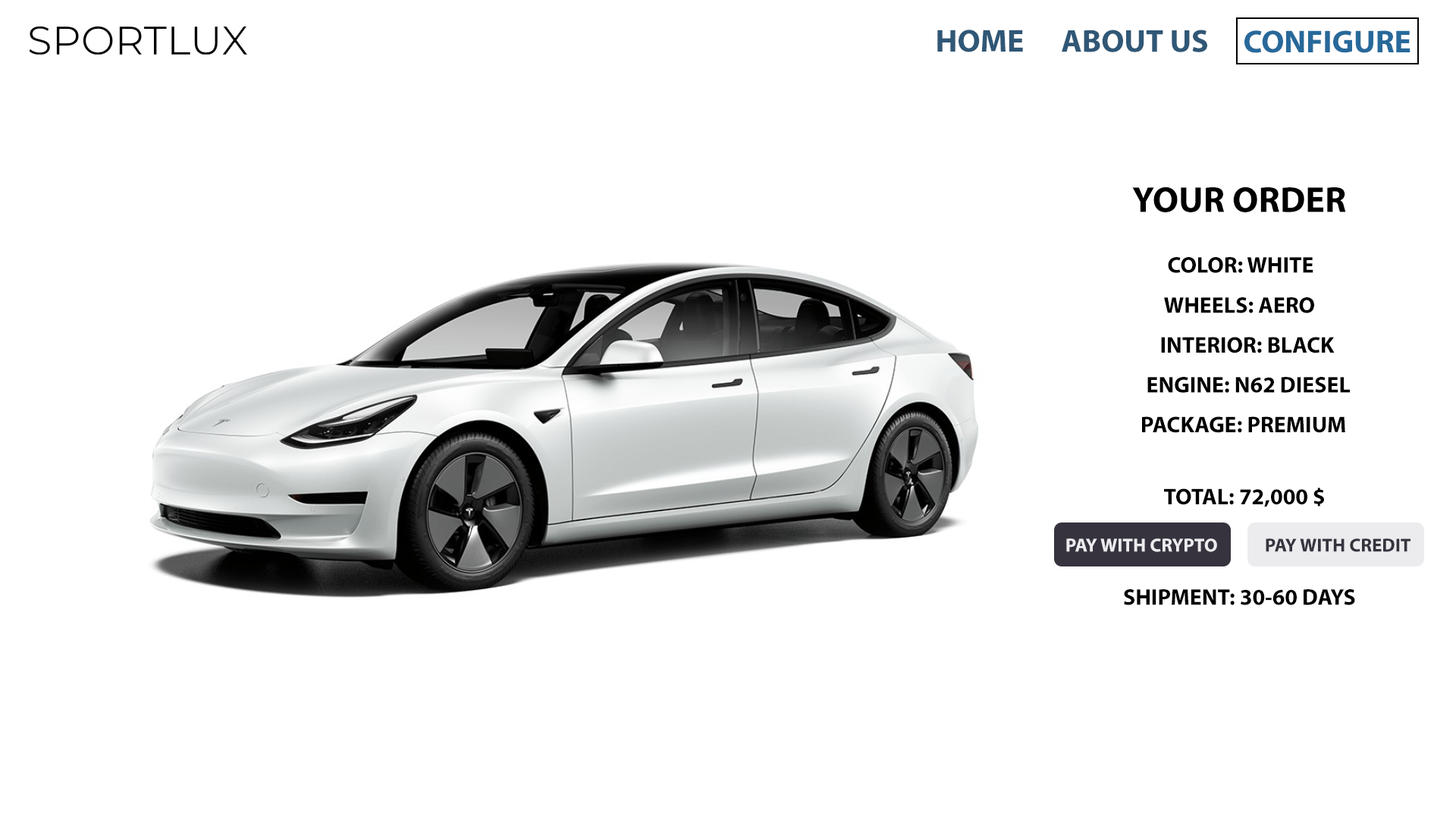
<style>
.page{position:relative;width:1456px;height:819px;background:#ffffff}
.page>*{position:absolute;margin:0}
.t1{font:31.8px "MyriadPro-Bold";color:#305776}
.t2{font:31.8px "MyriadPro-Bold";color:#27699a}
.t3{font:36.4px "MyriadPro-Bold";color:#000000}
.t4{font:22.7px "MyriadPro-Bold";color:#000000}
.t5{font:19px "MyriadPro-Bold";color:#ecebee}
.t6{font:19px "MyriadPro-Bold";color:#36333e}
</style>
<div class="page">
<p class="t1" style="left:937px;top:30px;width:86px;height:22px">HOME</p>
<p class="t1" style="left:1062px;top:30px;width:145px;height:22px">ABOUT US</p>
<p class="t2" style="left:1244px;top:30px;width:166px;height:23px">CONFIGURE</p>
<p class="t3" style="left:1132px;top:187px;width:214px;height:25px">YOUR ORDER</p>
<p class="t4" style="left:1168px;top:257px;width:145px;height:16px">COLOR: WHITE</p>
<p class="t4" style="left:1164px;top:297px;width:150px;height:16px">WHEELS: AERO</p>
<p class="t4" style="left:1161px;top:337px;width:174px;height:16px">INTERIOR: BLACK</p>
<p class="t4" style="left:1147px;top:377px;width:203px;height:16px">ENGINE: N62 DIESEL</p>
<p class="t4" style="left:1142px;top:416px;width:203px;height:17px">PACKAGE: PREMIUM</p>
<p class="t4" style="left:1164px;top:488px;width:160px;height:19px">TOTAL: 72,000 $</p>
<p class="t5" style="left:1066px;top:538px;width:151px;height:14px">PAY WITH CRYPTO</p>
<p class="t6" style="left:1266px;top:538px;width:144px;height:14px">PAY WITH CREDIT</p>
<p class="t4" style="left:1124px;top:589px;width:231px;height:16px">SHIPMENT: 30-60 DAYS</p>
</div>
